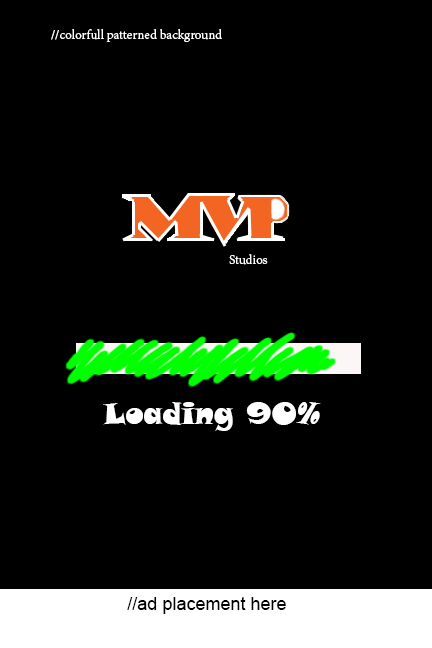
<style>
.page{position:relative;width:432px;height:648px;background:#000000}
.page>*{position:absolute;margin:0}
.t1{font:14px "AdobeDevanagari-Regular";color:#ffffff}
.t2{font:60px "GoudyStout";letter-spacing:-0.5em;color:#f26522}
.t3{font:30px "SnapITC-Regular";color:#ffffff}
.t4{font:18px "ArialMT";color:#000000}
.t5{font:30px "ArialMT";color:#000000}
</style>
<div class="page">
<p class="t1" style="left:51px;top:29px;width:171px;height:13px">//colorfull patterned background</p>
<p class="t2" style="left:122px;top:195px;width:170px;height:48px">Mvp</p>
<p class="t1" style="left:229px;top:254px;width:39px;height:11px">Studios</p>
<p class="t3" style="left:103px;top:402px;width:218px;height:29px">Loading 90%</p>
<p class="t4" style="left:127px;top:597px;width:159px;height:17px"><span class="t5">                </span>//ad placement here</p>
</div>
